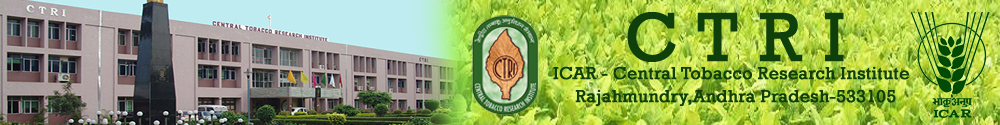
<style>
.page{position:relative;width:1000px;height:125px}
.page>*{position:absolute;margin:0}
.t1{font:70.6px "Rockwell";color:#0f3f0b;font-weight:bold}
.t2{font:17.6px "Rockwell";color:#0f3f0b;font-weight:bold}
</style>
<div class="page">
<p class="t1" style="left:627px;top:12px;width:217px;height:50px">C T R I</p>
<p class="t2" style="left:553px;top:66px;width:356px;height:14px">ICAR - Central Tobacco Research Institute</p>
<p class="t2" style="left:575px;top:89px;width:321px;height:17px">Rajahmundry,Andhra Pradesh-533105</p>
</div>
